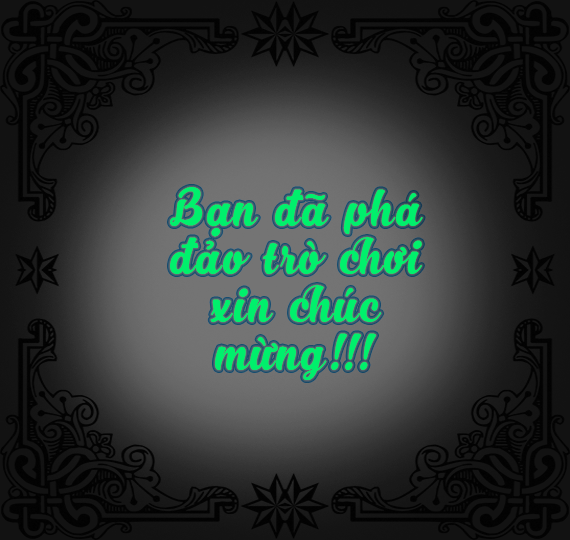
<style>
.page{position:relative;width:570px;height:540px}
.page>*{position:absolute;margin:0}
.t1{font:40px "iCielNabila";letter-spacing:0.075em;color:#00f06c}
</style>
<div class="page">
<p class="t1" style="left:170px;top:187px;width:253px;height:193px;text-align:center">Bạn đã phá đảo trò chơi<br>xin chúc mừng!!!</p>
</div>
